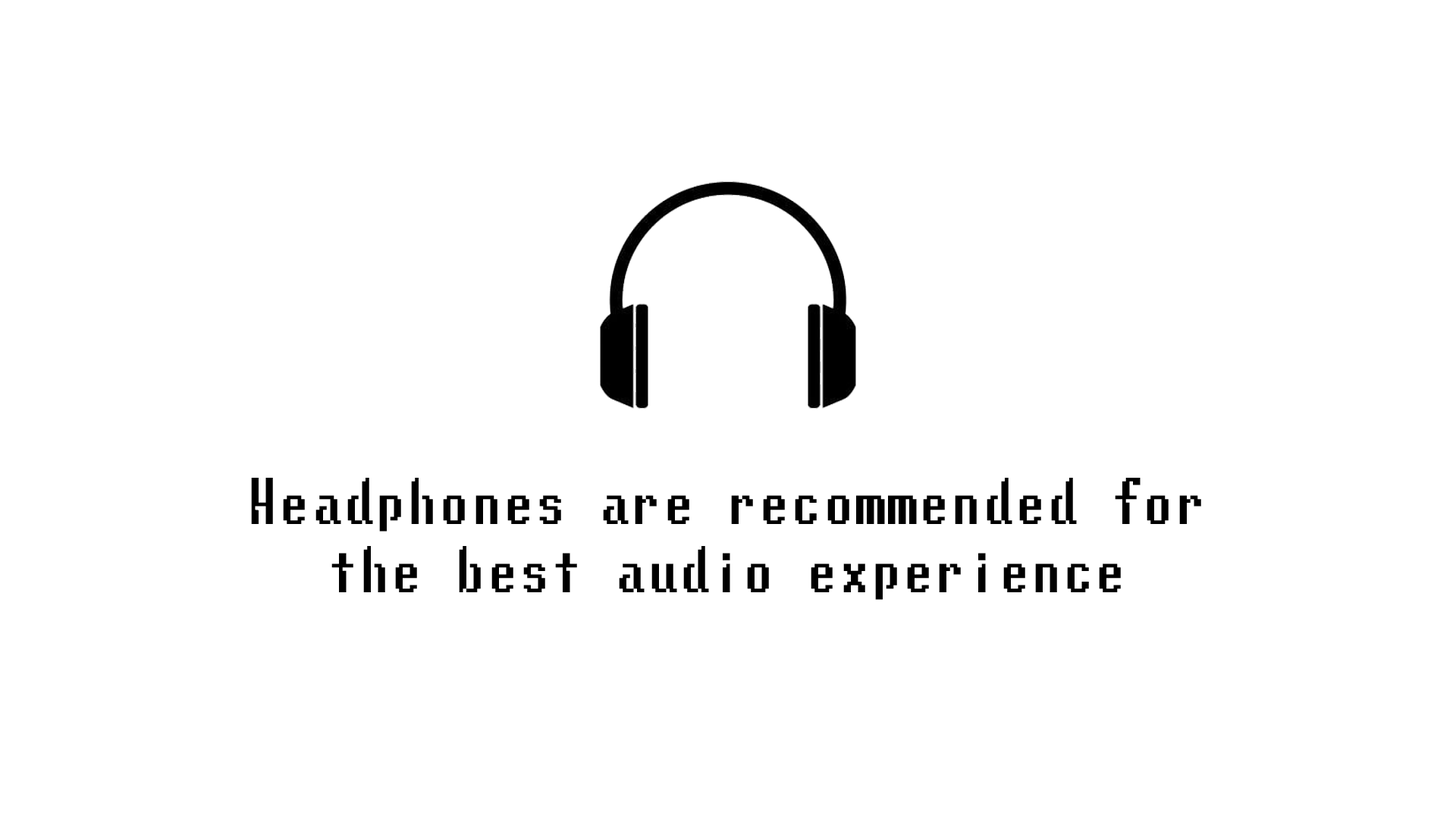
<style>
.page{position:relative;width:1456px;height:819px;background:#ffffff}
.page>*{position:absolute;margin:0}
.t1{font:56.9px "LunchtimeDoublySoReg";color:#000000}
</style>
<div class="page">
<p class="t1" style="left:251px;top:478px;width:950px;height:122px;text-align:center">Headphones are recommended for<br>the best audio experience</p>
</div>
